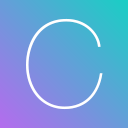
<style>
.page{position:relative;width:128px;height:128px}
.page>*{position:absolute;margin:0}
.t1{font:120px "HelveticaNeueLTStd-UltLt";color:#ffffff}
</style>
<div class="page">
<p class="t1" style="left:26px;top:18px;width:77px;height:92px">C</p>
</div>
